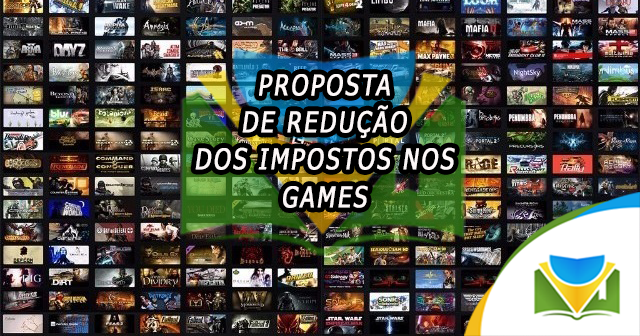
<style>
.page{position:relative;width:640px;height:336px}
.page>*{position:absolute;margin:0}
.t1{font:28.5px/18.6px "Tahoma";letter-spacing:0.1em;color:#fdf8f8;text-transform:uppercase;font-weight:bold;font-style:italic;scale:0.81 1}
</style>
<div class="page">
<p class="t1" style="left:195px;top:73px;width:260px;height:135px;text-align:center">proposta <br><br>de redução <br><br>dos impostos nos<br><br>games</p>
</div>
